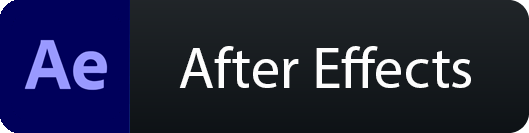
<style>
.page{position:relative;width:529px;height:133px;background:#00005b}
.page>*{position:absolute;margin:0}
.t1{font:58.9px "MyriadPro-Regular";color:#fdfdfd}
</style>
<div class="page">
<p class="t1" style="left:179px;top:46px;width:292px;height:42px">After Effects</p>
</div>
